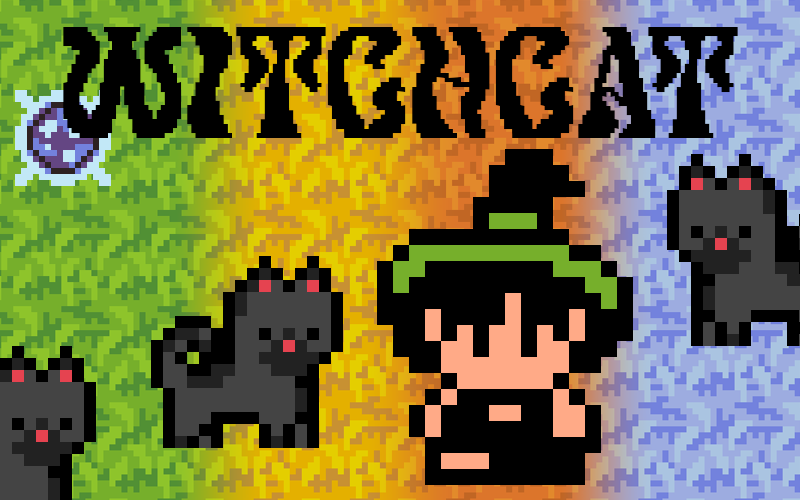
<style>
.page{position:relative;width:800px;height:500px;background:#000000}
.page>*{position:absolute;margin:0}
.t1{font:147.6px "PixeloutPersonalUseOnly-Reg";color:#000000;scale:0.88 1}
</style>
<div class="page">
<p class="t1" style="left:63px;top:27px;width:675px;height:111px">WITCHCAT</p>
</div>
